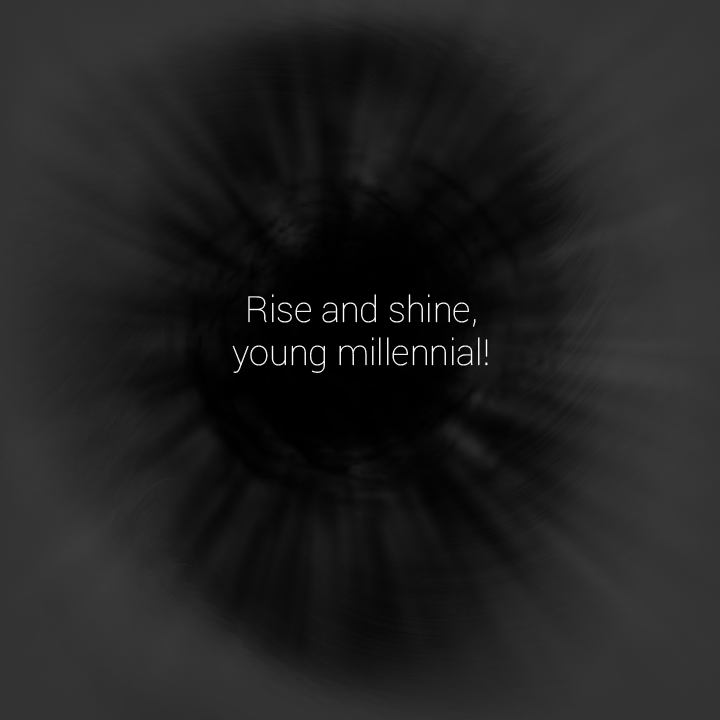
<style>
.page{position:relative;width:720px;height:720px}
.page>*{position:absolute;margin:0}
.t1{font:36px "Roboto-Thin";color:#ffffff}
</style>
<div class="page">
<p class="t1" style="left:232px;top:294px;width:256px;height:79px;text-align:center">Rise and shine,<br>young millennial!</p>
</div>
